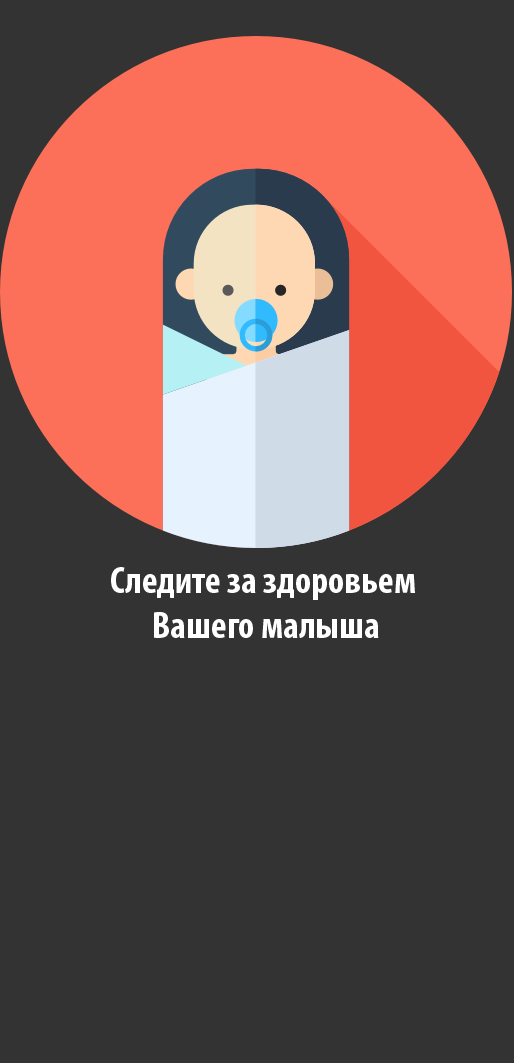
<style>
.page{position:relative;width:514px;height:1063px;background:#333333}
.page>*{position:absolute;margin:0}
.t1{font:37.5px "MyriadPro-BoldCond";color:#ffffff}
</style>
<div class="page">
<p class="t1" style="left:111px;top:567px;width:304px;height:71px;text-align:center">Следите за здоровьем <br>Вашего малыша</p>
</div>
